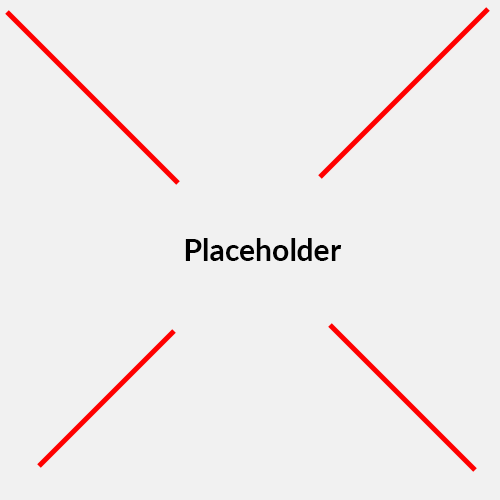
<style>
.page{position:relative;width:500px;height:500px;background:#f1f1f1}
.page>*{position:absolute;margin:0}
.t1{font:30px "Lato-Bold";color:#000000}
</style>
<div class="page">
<p class="t1" style="left:185px;top:238px;width:157px;height:23px">Placeholder</p>
</div>
